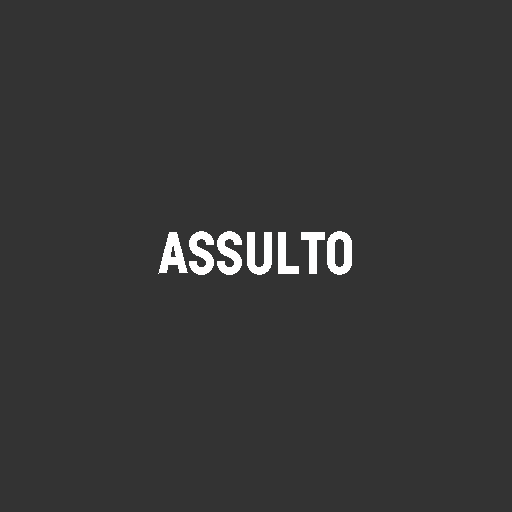
<style>
.page{position:relative;width:512px;height:512px;background:#333333}
.page>*{position:absolute;margin:0}
.t1{font:42px "NTCornelia-Regular";color:#fffefe}
</style>
<div class="page">
<p class="t1" style="left:158px;top:231px;width:194px;height:44px">assulto</p>
</div>
